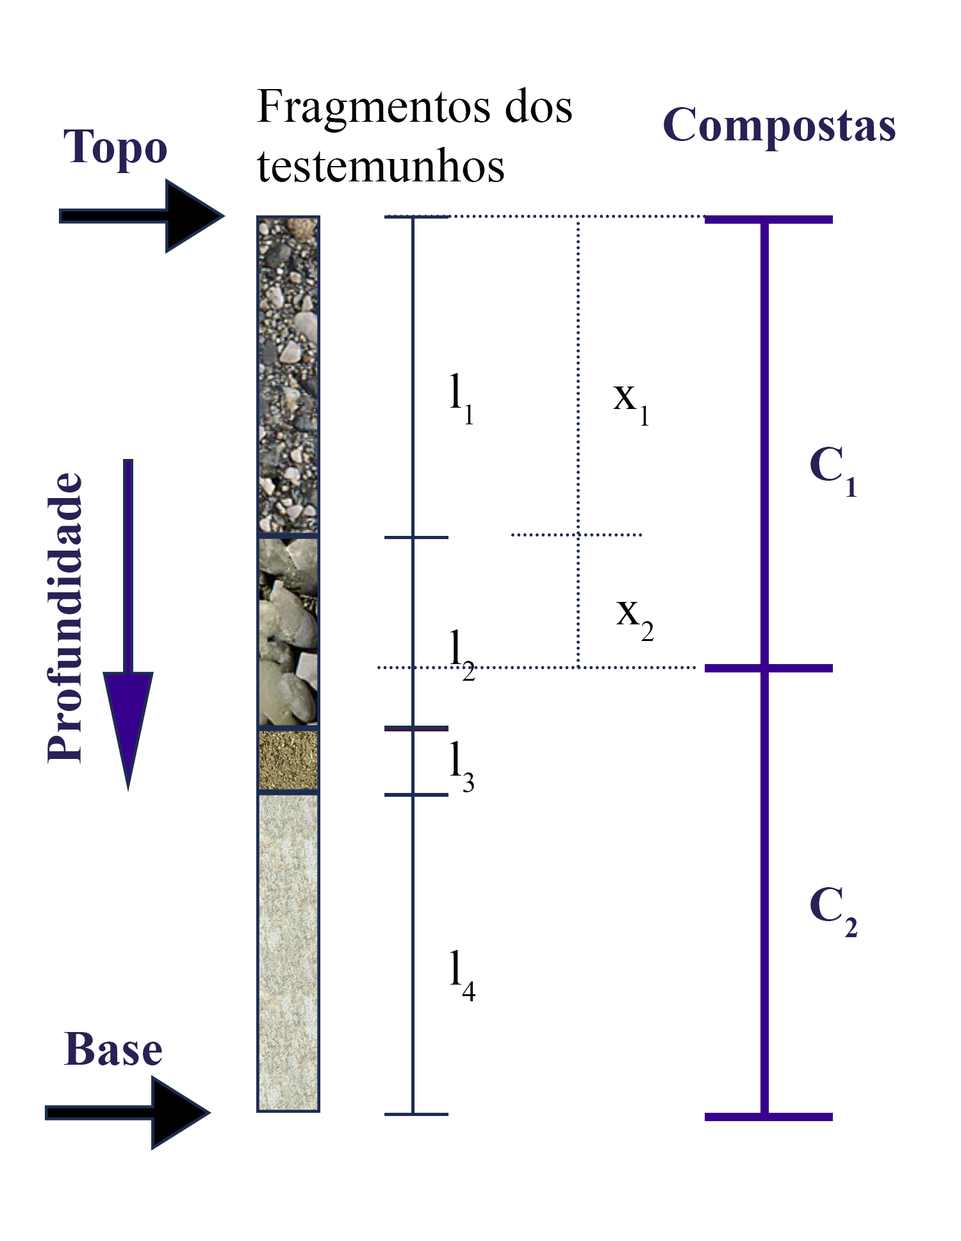
<style>
.page{position:relative;width:961px;height:1241px;background:#ffffff}
.page>*{position:absolute;margin:0}
.t1{font:49.8px "TimesNewRomanPSMT";color:#030303}
.t2{font:49.8px "TimesNewRomanPS-BoldMT";color:#292056}
</style>
<div class="page">
<p class="t1" style="left:256px;top:87px;width:316px;height:95px">Fragmentos dos <br>testemunhos</p>
<p class="t2" style="left:664px;top:107px;width:232px;height:44px">Compostas</p>
<p class="t2" style="left:63px;top:129px;width:104px;height:44px">Topo</p>
<p class="t1" style="left:450px;top:373px;width:23px;height:51px">l1</p>
<p class="t1" style="left:613px;top:386px;width:35px;height:39px">x1</p>
<p class="t2" style="left:811px;top:447px;width:46px;height:50px">C1</p>
<p class="t2" style="left:47px;top:473px;width:34px;height:291px;rotate:-90deg">Profundidade</p>
<p class="t1" style="left:616px;top:602px;width:38px;height:39px">x2</p>
<p class="t1" style="left:450px;top:629px;width:25px;height:52px">l2</p>
<p class="t1" style="left:450px;top:741px;width:24px;height:51px">l3</p>
<p class="t2" style="left:811px;top:887px;width:47px;height:50px">C2</p>
<p class="t1" style="left:450px;top:950px;width:25px;height:51px">l4</p>
<p class="t2" style="left:63px;top:1032px;width:99px;height:33px">Base</p>
</div>
